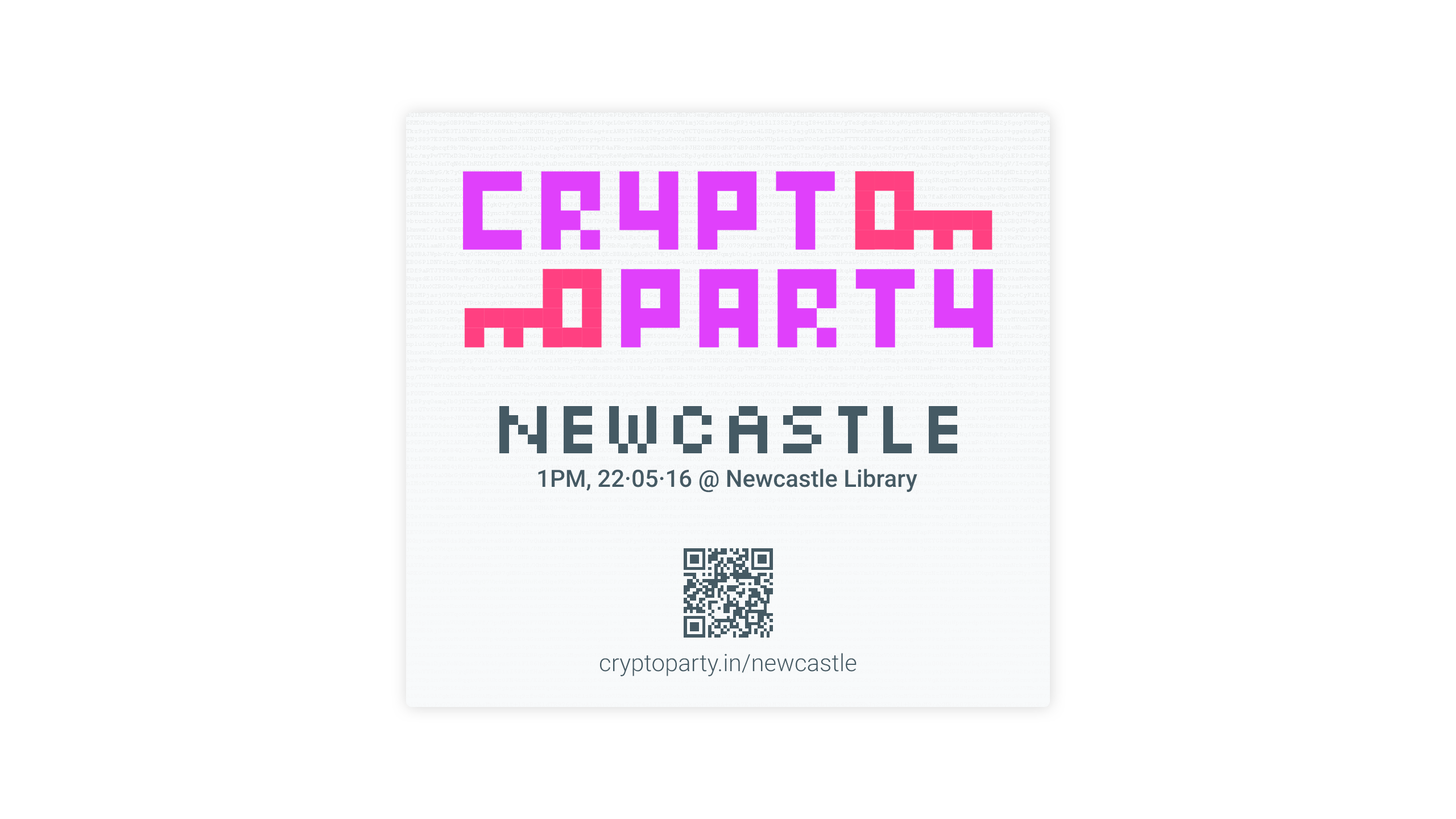
<style>
.page{position:relative;width:1456px;height:819px;background:#ffffff}
.page>*{position:absolute;margin:0}
.t1{font:79.6px "Silkscreen";letter-spacing:-0.025em;color:#455a64}
.t2{font:23.9px "Roboto-Medium";color:#455a64}
.t3{font:23.9px "Roboto-Light";color:#455a64}
</style>
<div class="page">
<p class="t1" style="left:499px;top:406px;width:458px;height:47px">NEWCASTLE</p>
<p class="t2" style="left:538px;top:469px;width:379px;height:24px">1PM, 22·05·16 @ Newcastle Library</p>
<p class="t3" style="left:600px;top:653px;width:257px;height:23px">cryptoparty.in/newcastle</p>
</div>
